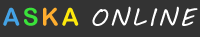
<style>
.page{position:relative;width:200px;height:37px;background:#333333}
.page>*{position:absolute;margin:0}
.t1{font:24.3px "MVBoli";letter-spacing:0.1em;color:#ffffff}
.t2{font:24.3px "ArialRoundedMTBold";letter-spacing:0.1em;color:#44a3e6}
.t3{font:24.3px "ArialRoundedMTBold";letter-spacing:0.1em;color:#3ae23a}
.t4{font:24.3px "ArialRoundedMTBold";letter-spacing:0.1em;color:#fead2e}
.t5{font:24.3px "ArialRoundedMTBold";letter-spacing:0.1em;color:#fce80c}
</style>
<div class="page">
<p class="t1" style="left:3px;top:6px;width:195px;height:20px"><span class="t2">A</span><span class="t3">S</span><span class="t4">K</span><span class="t5">A </span>ONLINE</p>
</div>
